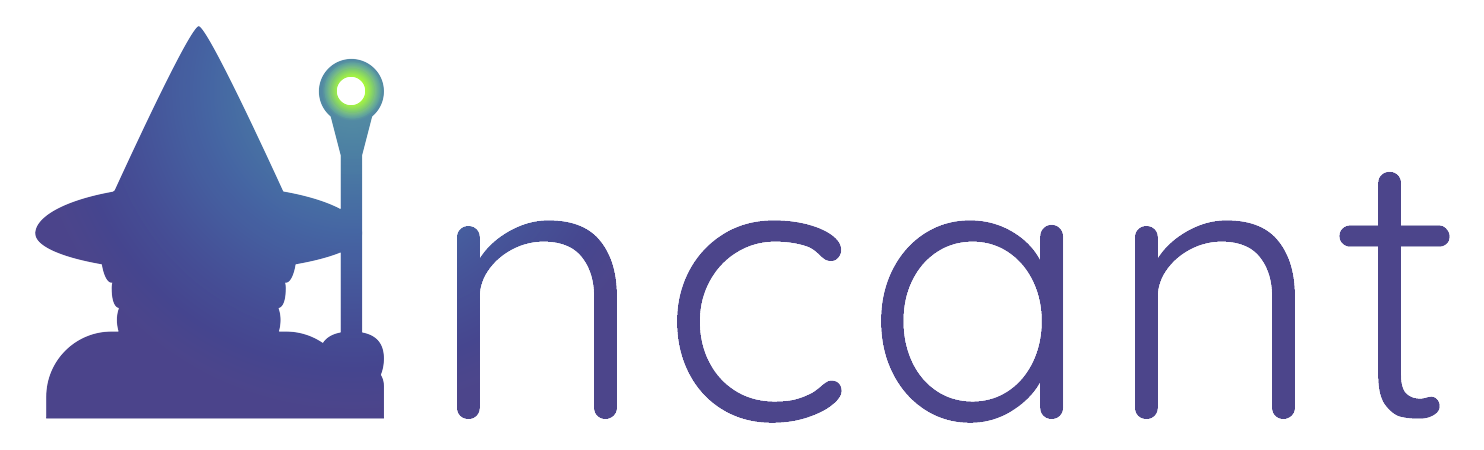
<style>
.page{position:relative;width:1484px;height:450px;background:#ffffff}
.page>*{position:absolute;margin:0}
.t1{font:379.8px "Quicksand-Regular";letter-spacing:0.06em;color:#4c458b}
</style>
<div class="page">
<p class="t1" style="left:457px;top:171px;width:993px;height:252px">ncant</p>
</div>
